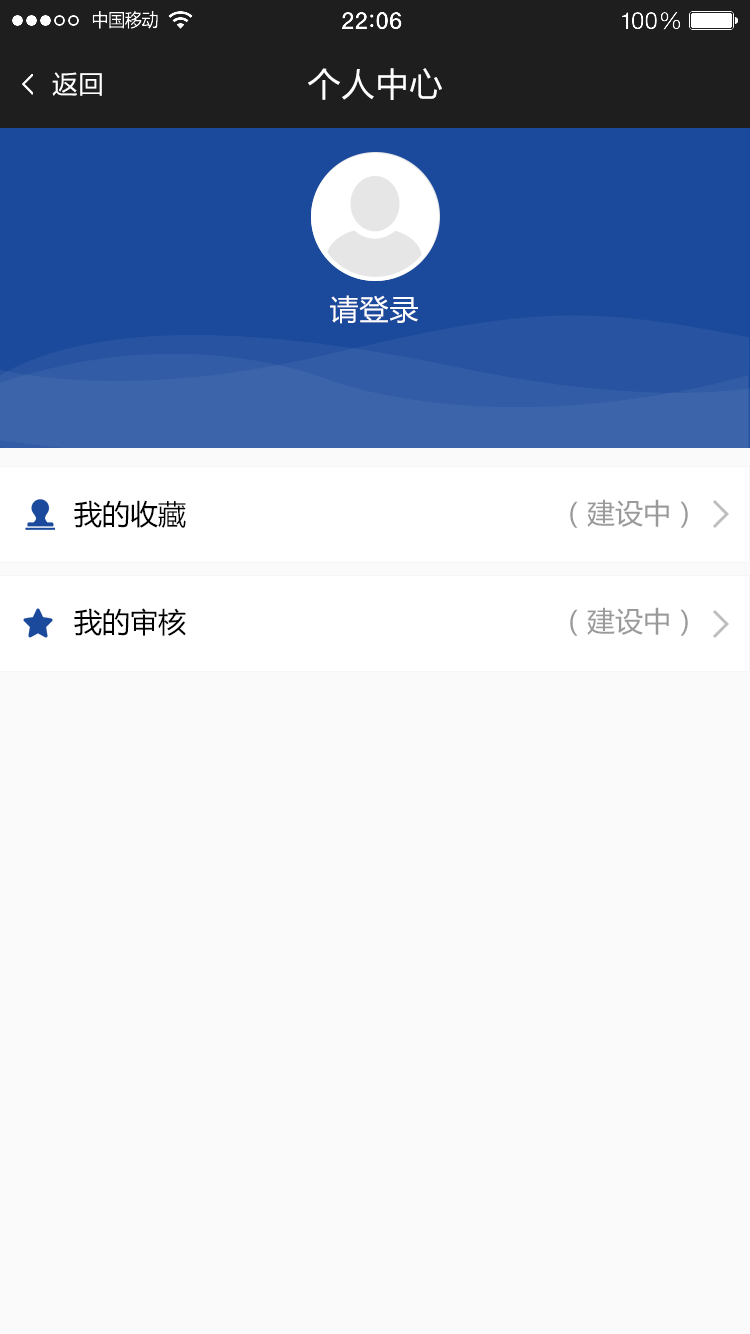
<style>
.page{position:relative;width:750px;height:1334px;background:#fafafa}
.page>*{position:absolute;margin:0}
.t1{font:26px "FZLTHJW--GB1-0";color:#ffffff}
.t2{font:34px "FZLTHJW--GB1-0";color:#ffffff}
.t3{font:30px "FZLTHJW--GB1-0";color:#ffffff}
.t4{font:28px/54px "MicrosoftYaHei";color:#000000}
.t5{font:28px/54px "MicrosoftYaHei";color:#9a9a9a}
</style>
<div class="page">
<p class="t1" style="left:52px;top:72px;width:50px;height:24px">返回</p>
<p class="t2" style="left:308px;top:68px;width:134px;height:32px">个人中心</p>
<p class="t3" style="left:330px;top:295px;width:88px;height:29px">请登录</p>
<p class="t4" style="left:74px;top:500px;width:112px;height:136px">我的收藏<br><br>我的审核</p>
<p class="t5" style="left:570px;top:499px;width:118px;height:137px">（建设中）<br><br>（建设中）</p>
</div>
